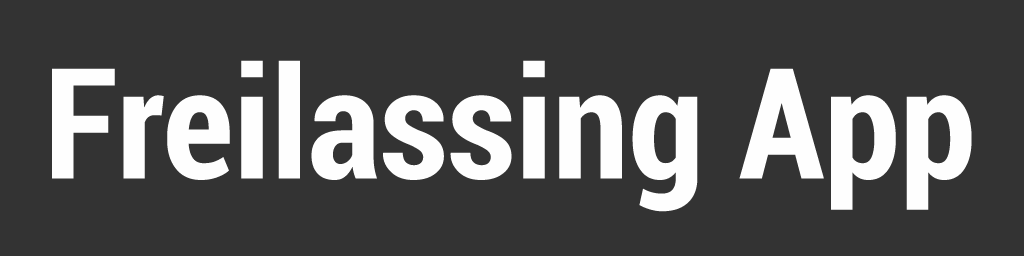
<style>
.page{position:relative;width:1024px;height:256px;background:#333333}
.page>*{position:absolute;margin:0}
.t1{font:154px "Roboto-BoldCondensed";color:#fefefe}
</style>
<div class="page">
<p class="t1" style="left:52px;top:60px;width:920px;height:152px">Freilassing App</p>
</div>
